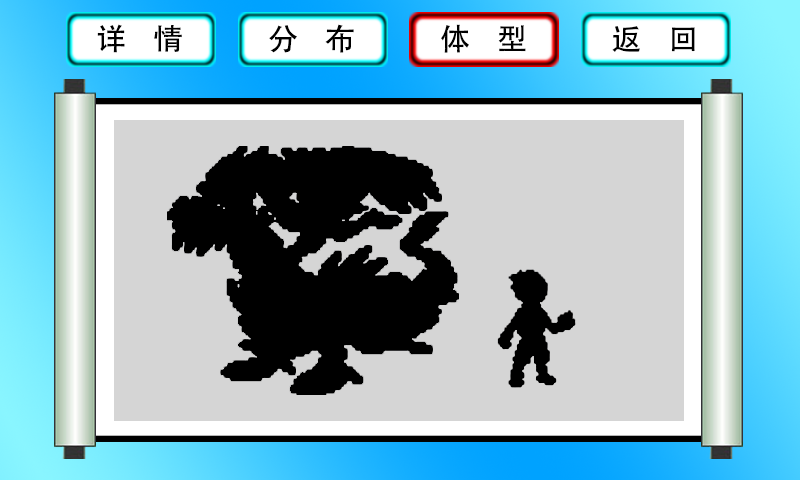
<style>
.page{position:relative;width:800px;height:480px;background:#d5d5d5}
.page>*{position:absolute;margin:0}
.t1{font:30px "AdobeHeitiStd-Regular";color:#000000}
</style>
<div class="page">
<p class="t1" style="left:97px;top:24px;width:85px;height:29px">详    情</p>
<p class="t1" style="left:269px;top:24px;width:85px;height:29px">分    布</p>
<p class="t1" style="left:441px;top:24px;width:85px;height:29px">体    型</p>
<p class="t1" style="left:612px;top:26px;width:83px;height:26px">返    回</p>
</div>
